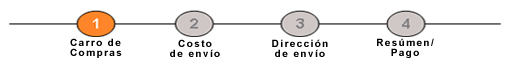
<style>
.page{position:relative;width:509px;height:66px;background:#ffffff}
.page>*{position:absolute;margin:0}
.t1{font:10px/10px "Arial-BoldMT";letter-spacing:0.14em;color:#000000}
</style>
<div class="page">
<p class="t1" style="left:70px;top:38px;width:52px;height:20px">Carro de <br>Compras</p>
<p class="t1" style="left:170px;top:39px;width:50px;height:18px;text-align:center">Costo<br>de envío</p>
<p class="t1" style="left:272px;top:39px;width:56px;height:18px;text-align:center">Dirección<br>de envío</p>
<p class="t1" style="left:377px;top:38px;width:57px;height:20px;text-align:center">Resúmen/<br>Pago</p>
</div>
